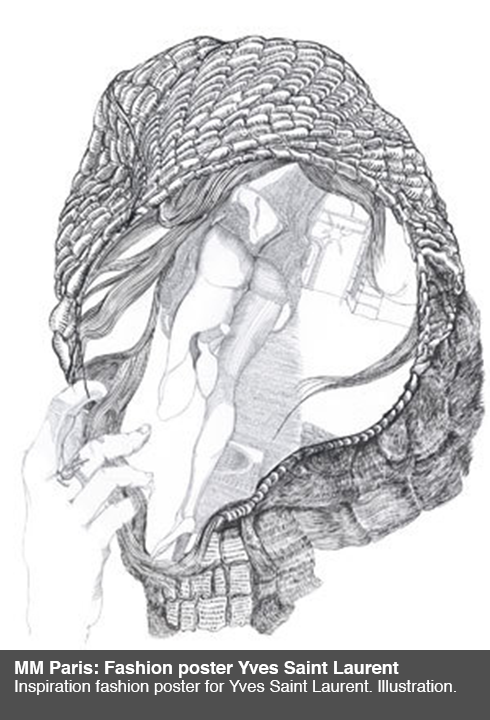
<style>
.page{position:relative;width:490px;height:720px;background:#ffffff}
.page>*{position:absolute;margin:0}
.t1{font:16.7px/18px "Helvetica";color:#ffffff}
.t2{font:18px/18px "Helvetica-Bold";color:#ffffff}
</style>
<div class="page">
<p class="t1" style="left:15px;top:661px;width:441px;height:34px"><span class="t2">MM Paris: Fashion poster Yves Saint Laurent<br></span>Inspiration fashion poster for Yves Saint Laurent. lllustration.</p>
</div>
